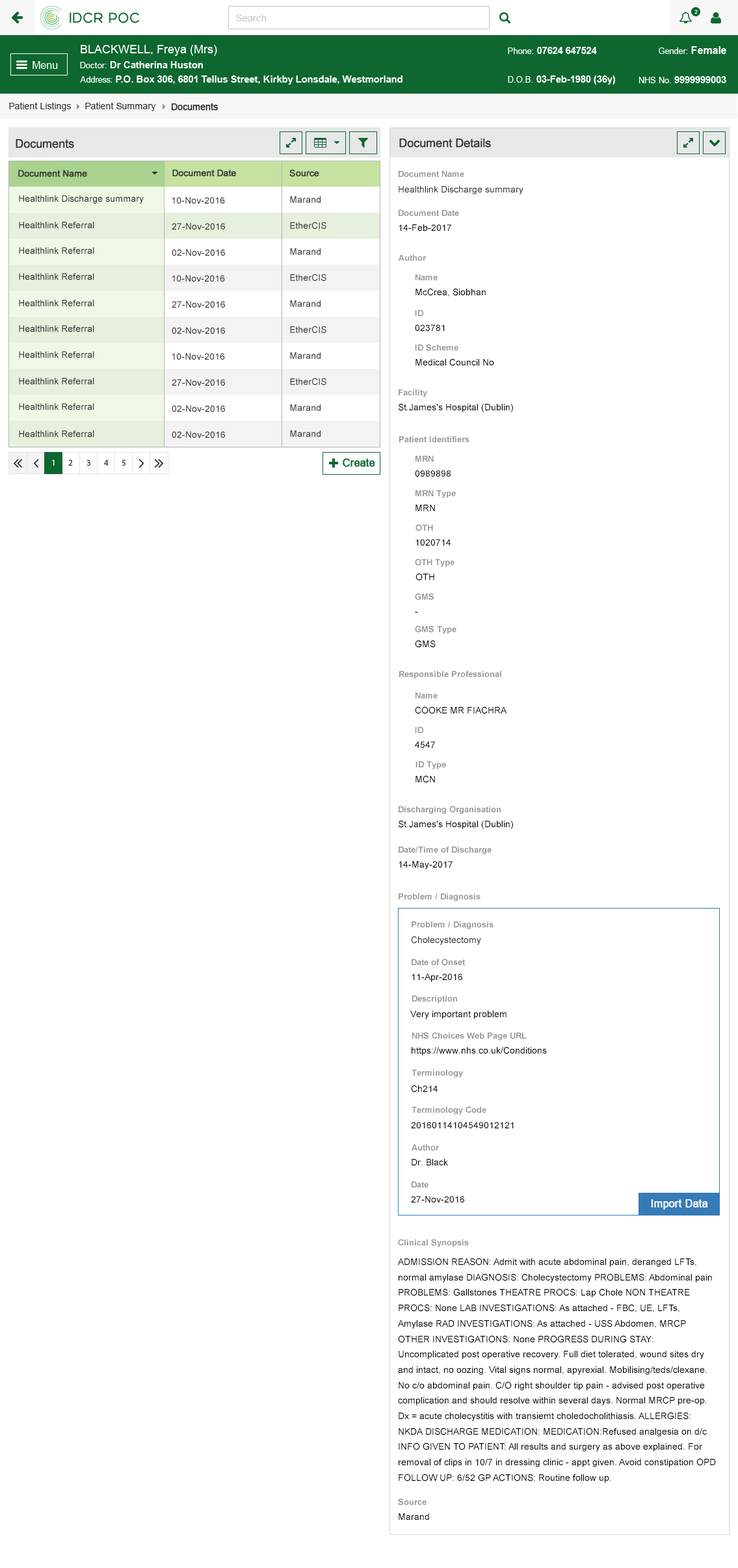
<style>
.page{position:relative;width:738px;height:1568px;background:#ffffff}
.page>*{position:absolute;margin:0}
.t1{font:9.1px "ArialMT";color:#313131}
.t2{font:9.1px "ArialMT";color:#313131;font-weight:bold}
.t3{font:11.7px "ArialMT";color:#303030;font-weight:bold}
.t4{font:9.1px "ArialMT";color:#303030;font-weight:bold}
.t5{font:8.5px "Arial-BoldMT";color:#959595}
.t6{font:9.1px "ArialMT";color:#303030}
.t7{font:9.1px "ArialMT";color:#000000}
.t8{font:10.4px "ArialMT";color:#fefefe;font-weight:bold}
.t9{font:9.1px/15.4px "ArialMT";color:#000000}
</style>
<div class="page">
<p class="t1" style="left:9px;top:102px;width:63px;height:9px">Patient Listings</p>
<p class="t1" style="left:85px;top:102px;width:71px;height:9px">Patient Summary</p>
<p class="t2" style="left:172px;top:103px;width:46px;height:8px">Documents</p>
<p class="t3" style="left:16px;top:139px;width:58px;height:9px">Documents</p>
<p class="t3" style="left:399px;top:139px;width:92px;height:9px">Document Details</p>
<p class="t4" style="left:18px;top:170px;width:69px;height:7px">Document Name</p>
<p class="t4" style="left:172px;top:169px;width:64px;height:7px">Document Date</p>
<p class="t4" style="left:289px;top:169px;width:30px;height:8px">Source</p>
<p class="t5" style="left:399px;top:170px;width:65px;height:7px">Document Name</p>
<p class="t6" style="left:19px;top:195px;width:125px;height:9px">Healthlink Discharge summary</p>
<p class="t6" style="left:172px;top:197px;width:53px;height:7px">10-Nov-2016</p>
<p class="t6" style="left:290px;top:196px;width:31px;height:7px">Marand</p>
<p class="t6" style="left:399px;top:186px;width:125px;height:8px">Healthlink Discharge summary</p>
<p class="t5" style="left:399px;top:209px;width:60px;height:7px">Document Date</p>
<p class="t6" style="left:19px;top:222px;width:75px;height:6px">Healthlink Referral</p>
<p class="t6" style="left:290px;top:222px;width:36px;height:7px">EtherCIS</p>
<p class="t6" style="left:172px;top:223px;width:53px;height:7px">27-Nov-2016</p>
<p class="t7" style="left:399px;top:224px;width:52px;height:7px">14-Feb-2017</p>
<p class="t6" style="left:19px;top:247px;width:75px;height:7px">Healthlink Referral</p>
<p class="t6" style="left:172px;top:249px;width:53px;height:7px">02-Nov-2016</p>
<p class="t6" style="left:290px;top:248px;width:31px;height:7px">Marand</p>
<p class="t5" style="left:399px;top:254px;width:28px;height:7px">Author</p>
<p class="t6" style="left:19px;top:273px;width:75px;height:7px">Healthlink Referral</p>
<p class="t6" style="left:172px;top:275px;width:53px;height:7px">10-Nov-2016</p>
<p class="t6" style="left:290px;top:274px;width:36px;height:7px">EtherCIS</p>
<p class="t5" style="left:416px;top:274px;width:22px;height:6px">Name</p>
<p class="t7" style="left:416px;top:288px;width:70px;height:9px">McCrea, Siobhan</p>
<p class="t6" style="left:19px;top:300px;width:75px;height:6px">Healthlink Referral</p>
<p class="t6" style="left:172px;top:301px;width:53px;height:7px">27-Nov-2016</p>
<p class="t6" style="left:290px;top:300px;width:31px;height:7px">Marand</p>
<p class="t5" style="left:415px;top:310px;width:8px;height:6px">ID</p>
<p class="t6" style="left:19px;top:325px;width:75px;height:7px">Healthlink Referral</p>
<p class="t6" style="left:172px;top:327px;width:53px;height:7px">02-Nov-2016</p>
<p class="t6" style="left:290px;top:326px;width:36px;height:7px">EtherCIS</p>
<p class="t7" style="left:415px;top:325px;width:30px;height:6px">023781</p>
<p class="t6" style="left:19px;top:351px;width:75px;height:7px">Healthlink Referral</p>
<p class="t6" style="left:172px;top:353px;width:53px;height:7px">10-Nov-2016</p>
<p class="t6" style="left:290px;top:352px;width:31px;height:7px">Marand</p>
<p class="t5" style="left:415px;top:344px;width:43px;height:7px">ID Scheme</p>
<p class="t7" style="left:416px;top:358px;width:78px;height:8px">Medical Council No</p>
<p class="t6" style="left:19px;top:378px;width:75px;height:6px">Healthlink Referral</p>
<p class="t6" style="left:290px;top:378px;width:36px;height:7px">EtherCIS</p>
<p class="t6" style="left:172px;top:379px;width:53px;height:7px">27-Nov-2016</p>
<p class="t5" style="left:399px;top:389px;width:28px;height:8px">Facility</p>
<p class="t6" style="left:19px;top:403px;width:75px;height:7px">Healthlink Referral</p>
<p class="t6" style="left:172px;top:405px;width:53px;height:7px">02-Nov-2016</p>
<p class="t6" style="left:290px;top:404px;width:31px;height:7px">Marand</p>
<p class="t7" style="left:398px;top:403px;width:115px;height:9px">St.James's Hospital (Dublin)</p>
<p class="t6" style="left:19px;top:431px;width:75px;height:6px">Healthlink Referral</p>
<p class="t6" style="left:172px;top:431px;width:53px;height:7px">02-Nov-2016</p>
<p class="t6" style="left:290px;top:430px;width:31px;height:7px">Marand</p>
<p class="t5" style="left:399px;top:436px;width:71px;height:6px">Patient Identifiers</p>
<p class="t5" style="left:416px;top:455px;width:18px;height:7px">MRN</p>
<p class="t7" style="left:415px;top:470px;width:36px;height:7px">0989898</p>
<p class="t5" style="left:416px;top:490px;width:40px;height:8px">MRN Type</p>
<p class="t7" style="left:416px;top:505px;width:19px;height:6px">MRN</p>
<p class="t5" style="left:416px;top:524px;width:17px;height:7px">OTH</p>
<p class="t7" style="left:416px;top:539px;width:35px;height:7px">1020714</p>
<p class="t5" style="left:415px;top:559px;width:40px;height:8px">OTH Type</p>
<p class="t7" style="left:416px;top:573px;width:18px;height:8px">OTH</p>
<p class="t5" style="left:415px;top:593px;width:19px;height:7px">GMS</p>
<p class="t7" style="left:415px;top:611px;width:3px;height:2px">-</p>
<p class="t5" style="left:415px;top:626px;width:42px;height:8px">GMS Type</p>
<p class="t7" style="left:415px;top:640px;width:21px;height:8px">GMS</p>
<p class="t5" style="left:399px;top:671px;width:102px;height:8px">Responsible Professional</p>
<p class="t5" style="left:416px;top:692px;width:22px;height:6px">Name</p>
<p class="t7" style="left:415px;top:706px;width:92px;height:8px">COOKE MR FIACHRA</p>
<p class="t5" style="left:415px;top:726px;width:8px;height:7px">ID</p>
<p class="t7" style="left:415px;top:741px;width:20px;height:7px">4547</p>
<p class="t5" style="left:416px;top:761px;width:30px;height:8px">ID Type</p>
<p class="t7" style="left:416px;top:775px;width:19px;height:8px">MCN</p>
<p class="t5" style="left:399px;top:806px;width:102px;height:8px">Discharging Organisation</p>
<p class="t7" style="left:398px;top:820px;width:115px;height:9px">St.James's Hospital (Dublin)</p>
<p class="t5" style="left:399px;top:846px;width:93px;height:9px">Date/Time of Discharge</p>
<p class="t7" style="left:399px;top:861px;width:54px;height:9px">14-May-2017</p>
<p class="t5" style="left:399px;top:893px;width:82px;height:8px">Problem / Diagnosis</p>
<p class="t5" style="left:412px;top:921px;width:82px;height:8px">Problem / Diagnosis</p>
<p class="t6" style="left:411px;top:936px;width:70px;height:9px">Cholecystectomy</p>
<p class="t5" style="left:412px;top:959px;width:54px;height:7px">Date of Onset</p>
<p class="t7" style="left:412px;top:974px;width:50px;height:8px">11-Apr-2016</p>
<p class="t5" style="left:412px;top:995px;width:45px;height:8px">Description</p>
<p class="t7" style="left:410px;top:1011px;width:97px;height:8px">Very important problem</p>
<p class="t5" style="left:412px;top:1032px;width:115px;height:9px">NHS Choices Web Page URL</p>
<p class="t7" style="left:412px;top:1046px;width:135px;height:10px">https://www.nhs.co.uk/Conditions</p>
<p class="t5" style="left:412px;top:1069px;width:51px;height:9px">Terminology</p>
<p class="t7" style="left:411px;top:1085px;width:27px;height:8px">Ch214</p>
<p class="t5" style="left:412px;top:1106px;width:74px;height:9px">Terminology Code</p>
<p class="t7" style="left:411px;top:1122px;width:103px;height:6px">20160114104549012121</p>
<p class="t5" style="left:412px;top:1144px;width:28px;height:6px">Author</p>
<p class="t7" style="left:412px;top:1159px;width:36px;height:6px">Dr. Black</p>
<p class="t5" style="left:412px;top:1181px;width:17px;height:7px">Date</p>
<p class="t7" style="left:411px;top:1196px;width:53px;height:7px">27-Nov-2016</p>
<p class="t8" style="left:651px;top:1199px;width:57px;height:11px">Import Data</p>
<p class="t5" style="left:398px;top:1239px;width:71px;height:8px">Clinical Synopsis</p>
<p class="t9" style="left:398px;top:1258px;width:318px;height:225px">ADMISSION REASON: Admit with acute abdominal pain, deranged LFTs, normal amylase DIAGNOSIS: Cholecystectomy PROBLEMS: Abdominal pain PROBLEMS: Gallstones THEATRE PROCS: Lap Chole NON THEATRE PROCS: None LAB INVESTIGATIONS: As attached - FBC, UE, LFTs, Amylase RAD INVESTIGATIONS: As attached - USS Abdomen, MRCP OTHER INVESTIGATIONS: None PROGRESS DURING STAY: Uncomplicated post operative recovery. Full diet tolerated, wound sites dry and intact, no oozing. Vital signs normal, apyrexial. Mobilising/teds/clexane. No c/o abdominal pain. C/O right shoulder tip pain - advised post operative complication and should resolve within several days. Normal MRCP pre-op. Dx = acute cholecystitis with transiemt choledocholithiasis. ALLERGIES: NKDA DISCHARGE MEDICATION: MEDICATION:Refused analgesia on d/c INFO GIVEN TO PATIENT: All results and surgery as above explained. For removal of clips in 10/7 in dressing clinic - appt given. Avoid constipation OPD FOLLOW UP: 6/52 GP ACTIONS: Routine follow up.</p>
<p class="t5" style="left:398px;top:1498px;width:29px;height:8px">Source</p>
<p class="t7" style="left:399px;top:1513px;width:30px;height:7px">Marand</p>
</div>
